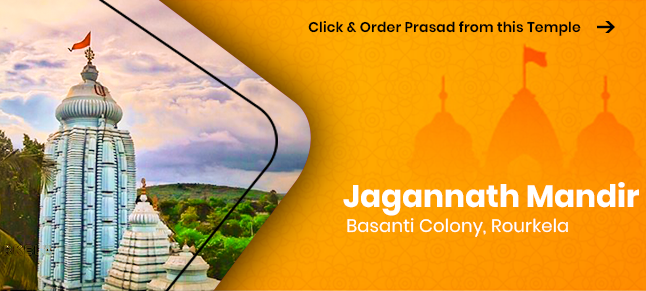
<style>
.page{position:relative;width:646px;height:291px}
.page>*{position:absolute;margin:0}
.t1{font:14px "Poppins-SemiBold";letter-spacing:0.01em;color:#000000}
.t2{font:31px "Poppins-Bold";color:#ffffff}
.t3{font:18px "Poppins-Regular";letter-spacing:0.01em;color:#ffffff}
</style>
<div class="page">
<p class="t1" style="left:308px;top:21px;width:273px;height:15px">Click &amp; Order Prasad from this Temple</p>
<p class="t2" style="left:343px;top:182px;width:296px;height:34px">Jagannath Mandir</p>
<p class="t3" style="left:347px;top:218px;width:221px;height:19px">Basanti Colony, Rourkela</p>
</div>
